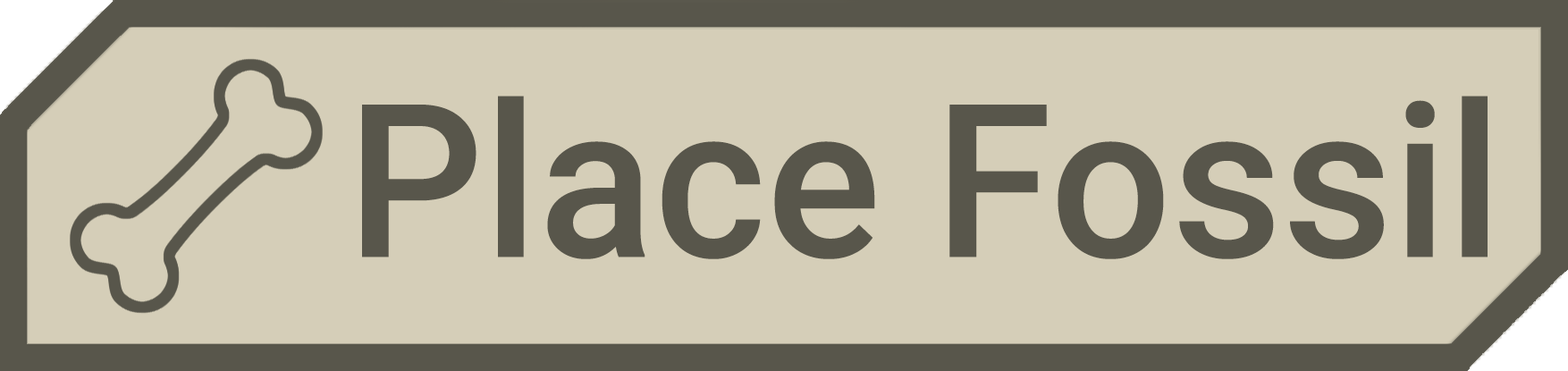
<style>
.page{position:relative;width:1568px;height:371px;background:#d5ceb8}
.page>*{position:absolute;margin:0}
.t1{font:214.2px "Roboto-Medium";color:#58564b}
</style>
<div class="page">
<p class="t1" style="left:362px;top:96px;width:1126px;height:163px">Place Fossil</p>
</div>
